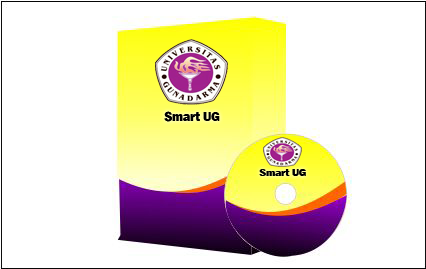
<style>
.page{position:relative;width:426px;height:269px;background:#ffffff}
.page>*{position:absolute;margin:0}
.t1{font:12.5px "FranklinGothic-Heavy";color:#000000}
.t2{font:9.9px "FranklinGothic-Heavy";color:#000000;scale:1.07 1}
</style>
<div class="page">
<p class="t1" style="left:164px;top:111px;width:56px;height:11px">Smart UG</p>
<p class="t2" style="left:259px;top:169px;width:47px;height:7px">Smart UG</p>
</div>
